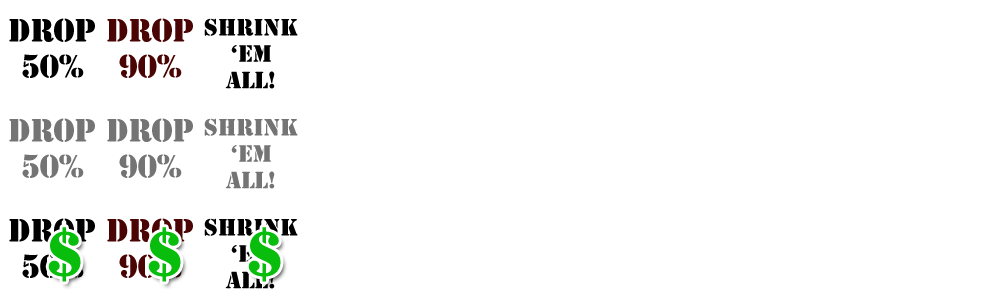
<style>
.page{position:relative;width:1000px;height:300px;background:#ffffff}
.page>*{position:absolute;margin:0}
.t1{font:30px "StencilStd";color:#000000}
.t2{font:30px "StencilStd";color:#4b0404}
.t3{font:22px "StencilStd";color:#000000}
.t4{font:30px "StencilStd";color:#747474}
.t5{font:22px "StencilStd";color:#747474}
.t6{font:60px "StencilStd";color:#08bd0c}
</style>
<div class="page">
<p class="t1" style="left:9px;top:18px;width:86px;height:60px;text-align:center">Drop<br>50%</p>
<p class="t2" style="left:107px;top:18px;width:86px;height:60px;text-align:center">Drop<br>90%</p>
<p class="t3" style="left:204px;top:18px;width:94px;height:71px;text-align:center">SHRINK<br>‘em <br>all!</p>
<p class="t4" style="left:9px;top:118px;width:86px;height:60px;text-align:center">Drop<br>50%</p>
<p class="t4" style="left:107px;top:118px;width:86px;height:60px;text-align:center">Drop<br>90%</p>
<p class="t5" style="left:204px;top:118px;width:94px;height:71px;text-align:center">SHRINK<br>‘em <br>all!</p>
<p class="t1" style="left:9px;top:218px;width:86px;height:60px;text-align:center">Drop<br>50%</p>
<p class="t2" style="left:107px;top:218px;width:86px;height:60px;text-align:center">Drop<br>90%</p>
<p class="t3" style="left:204px;top:218px;width:94px;height:71px;text-align:center">SHRINK<br>‘em <br>all!</p>
<p class="t6" style="left:48px;top:227px;width:33px;height:55px">$</p>
<p class="t6" style="left:148px;top:227px;width:33px;height:55px">$</p>
<p class="t6" style="left:248px;top:227px;width:33px;height:55px">$</p>
</div>
